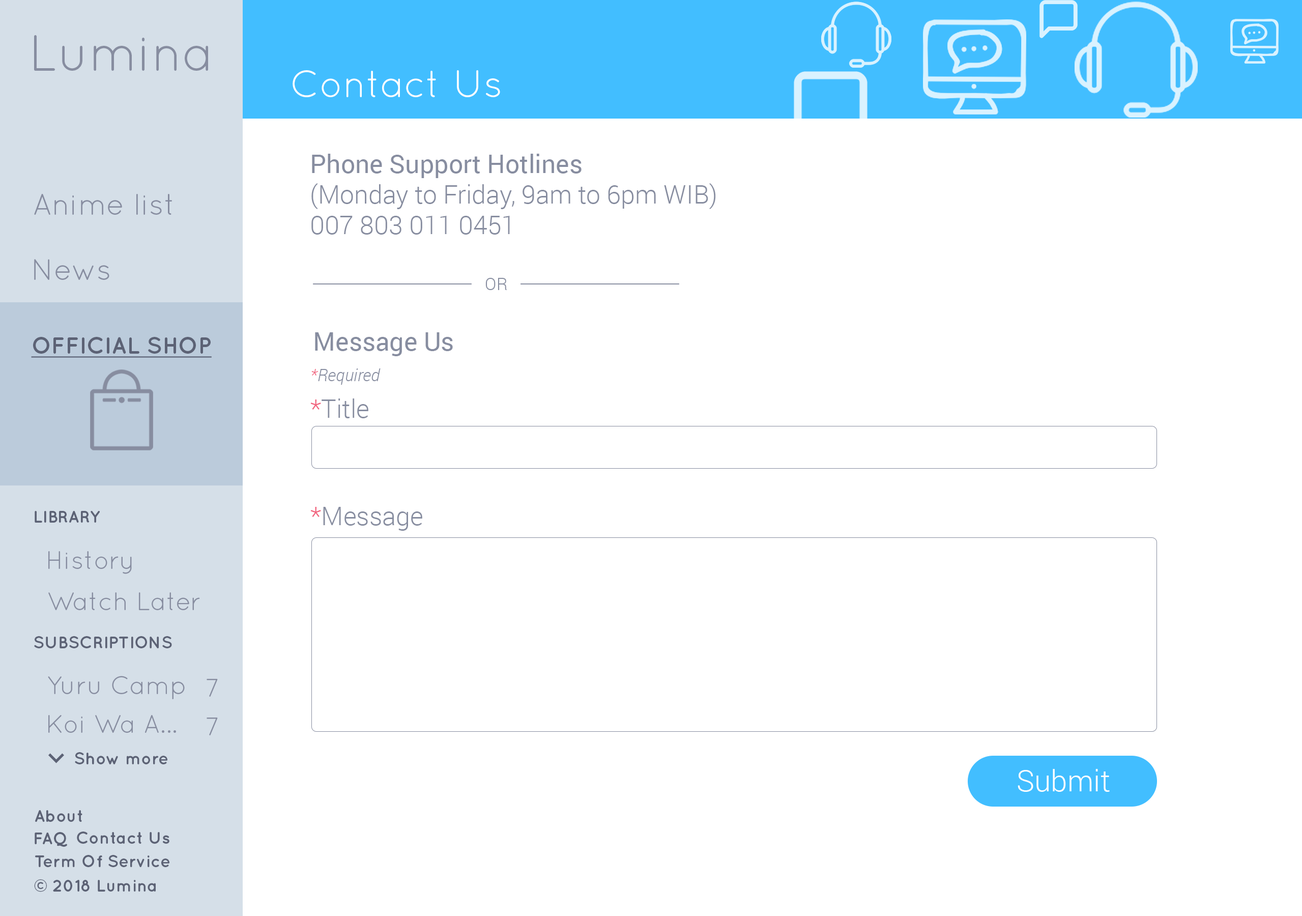
<style>
.page{position:relative;width:1302px;height:916px;background:#ffffff}
.page>*{position:absolute;margin:0}
.t1{font:50.9px "QuicksandBook-Regular";color:#878da0}
.t2{font:38.2px "QuicksandBook-Regular";color:#ffffff}
.t3{font:25.4px "Roboto-Light";color:#878da0}
.t4{font:25.4px "Roboto-Regular";color:#878da0}
.t5{font:29.7px "Quicksand-Regular";color:#878da0}
.t6{font:29.7px "QuicksandBook-Regular";color:#878da0}
.t7{font:17px "Roboto-Light";color:#878da0}
.t8{font:23.3px "QuicksandBold-Regular";color:#5c6275;text-decoration:underline}
.t9{font:17px "Roboto-LightItalic";color:#878da0}
.t10{font:17px "Roboto-LightItalic";color:#f1637e}
.t11{font:25.4px "Roboto-Light";color:#f1637e}
.t12{font:17px "QuicksandBold-Regular";color:#5c6275}
.t13{font:25.4px "QuicksandBook-Regular";color:#878da0}
.t14{font:17px "Quicksand-Bold";color:#5c6275}
.t15{font:29.7px "Roboto-Light";color:#ffffff}
</style>
<div class="page">
<p class="t1" style="left:34px;top:35px;width:174px;height:36px">Lumina</p>
<p class="t2" style="left:293px;top:70px;width:207px;height:27px">Contact Us</p>
<p class="t3" style="left:311px;top:154px;width:405px;height:81px"><span class="t4">Phone Support Hotlines<br></span>(Monday to Friday, 9am to 6pm WIB) <br>007 803 011 0451</p>
<p class="t5" style="left:34px;top:194px;width:138px;height:21px">Anime list</p>
<p class="t6" style="left:34px;top:259px;width:75px;height:21px">News</p>
<p class="t7" style="left:485px;top:278px;width:22px;height:12px">OR</p>
<p class="t8" style="left:31px;top:337px;width:181px;height:21px">OFFICIAL SHOP</p>
<p class="t4" style="left:315px;top:332px;width:138px;height:24px">Message Us</p>
<p class="t9" style="left:311px;top:368px;width:70px;height:17px"><span class="t10">*</span>Required</p>
<p class="t3" style="left:310px;top:398px;width:58px;height:20px"><span class="t11">*</span>Title</p>
<p class="t3" style="left:310px;top:507px;width:112px;height:24px"><span class="t11">*</span>Message</p>
<p class="t12" style="left:35px;top:511px;width:65px;height:12px">LIBRARY</p>
<p class="t13" style="left:48px;top:551px;width:84px;height:23px">History</p>
<p class="t13" style="left:48px;top:592px;width:152px;height:18px">Watch Later</p>
<p class="t12" style="left:34px;top:636px;width:138px;height:12px">SUBSCRIPTIONS</p>
<p class="t13" style="left:48px;top:676px;width:137px;height:23px">Yuru Camp</p>
<p class="t13" style="left:207px;top:679px;width:11px;height:18px">7</p>
<p class="t13" style="left:48px;top:715px;width:128px;height:18px">Koi Wa A...</p>
<p class="t13" style="left:207px;top:717px;width:11px;height:18px">7</p>
<p class="t14" style="left:75px;top:752px;width:92px;height:12px">Show more</p>
<p class="t15" style="left:1018px;top:769px;width:92px;height:23px">Submit</p>
<p class="t14" style="left:35px;top:810px;width:47px;height:12px">About</p>
<p class="t14" style="left:35px;top:832px;width:32px;height:15px">FAQ</p>
<p class="t14" style="left:77px;top:831px;width:92px;height:13px">Contact Us</p>
<p class="t14" style="left:35px;top:855px;width:134px;height:12px">Term Of Service</p>
<p class="t14" style="left:34px;top:879px;width:122px;height:13px">© 2018 Lumina</p>
</div>
